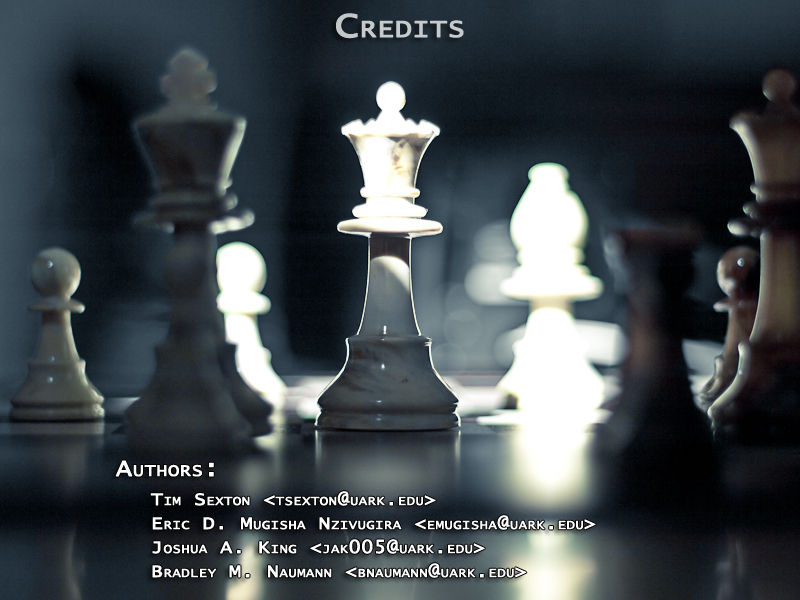
<style>
.page{position:relative;width:800px;height:600px}
.page>*{position:absolute;margin:0}
.t1{font:36px "LucidaConsole";color:#c7cacc;font-variant:small-caps;font-weight:bold;scale:1.11 1}
.t2{font:24px "LucidaConsole";color:#ffffff;font-variant:small-caps;font-weight:bold;scale:1.11 1}
.t3{font:18px "LucidaConsole";color:#ffffff;font-variant:small-caps;font-weight:bold;scale:1.11 1}
</style>
<div class="page">
<p class="t1" style="left:336px;top:13px;width:128px;height:26px">Credits</p>
<p class="t2" style="left:115px;top:460px;width:99px;height:17px">Authors:</p>
<p class="t3" style="left:150px;top:491px;width:446px;height:87px">Tim Sexton &lt;tsexton@uark.edu&gt;<br>Eric D. Mugisha Nzivugira &lt;emugisha@uark.edu&gt;<br>Joshua A. King &lt;jak005@uark.edu&gt;<br>Bradley M. Naumann &lt;bnaumann@uark.edu&gt;</p>
</div>
